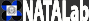
<style>
.page{position:relative;width:89px;height:21px;background:#fffffd}
.page>*{position:absolute;margin:0}
.t1{font:30.1px "MyriadPro-Bold";color:#fffffd;scale:0.55 1}
</style>
<div class="page">
<p class="t1" style="left:23px;top:0px;width:66px;height:22px">NATALab</p>
<p class="t1" style="left:23px;top:0px;width:66px;height:22px">NATALab</p>
<p class="t1" style="left:23px;top:0px;width:66px;height:22px">NATALab</p>
<p class="t1" style="left:23px;top:0px;width:66px;height:22px">NATALab</p>
</div>
